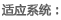
<style>
.page{position:relative;width:61px;height:20px;background:#ffffff}
.page>*{position:absolute;margin:0}
.t1{font:12px "MicrosoftYaHei";color:#5d5d5d;font-weight:bold}
</style>
<div class="page">
<p class="t1" style="left:1px;top:3px;width:58px;height:13px">适应系统：</p>
</div>
